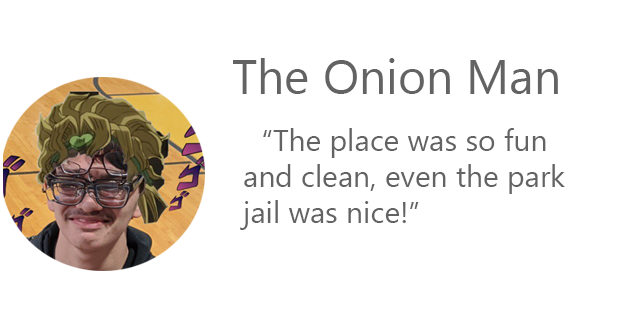
<style>
.page{position:relative;width:637px;height:329px;background:#ffffff}
.page>*{position:absolute;margin:0}
.t1{font:30px "MicrosoftTaiLe";color:#636363}
</style>
<div class="page">
<p class="t1" style="left:240px;top:128px;width:325px;height:102px">“The place was so fun and clean, even the park jail was nice!”</p>
</div>
